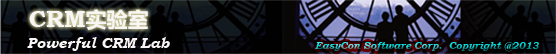
<style>
.page{position:relative;width:556px;height:54px}
.page>*{position:absolute;margin:0}
.t1{font:23px "BookmanOldStyle-Bold";color:#f9f5f5}
.t2{font:21px "MicrosoftYaHei-Bold";color:#f9f5f5}
.t3{font:15px "BookmanOldStyle-BoldItalic";color:#f9f5f5}
.t4{font:10px "BookmanOldStyle-BoldItalic"}
</style>
<div class="page">
<p class="t1" style="left:29px;top:9px;width:119px;height:21px">CRM<span class="t2">实验室</span></p>
<p class="t3" style="left:27px;top:37px;width:143px;height:14px">Powerful CRM Lab</p>
<p class="t4" style="left:315px;top:42px;width:224px;height:10px">EasyCon Software Corp.  Copyright @2013</p>
</div>
